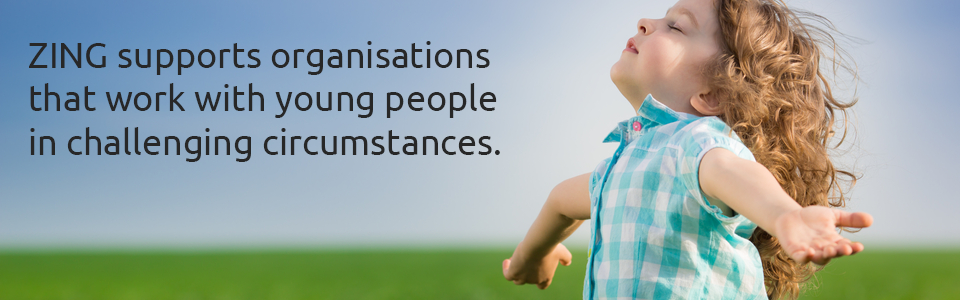
<style>
.page{position:relative;width:960px;height:300px}
.page>*{position:absolute;margin:0}
.t1{font:36px "Ubuntu";color:#272727}
</style>
<div class="page">
<p class="t1" style="left:29px;top:41px;width:471px;height:121px">ZING supports organisations that work with young people in challenging circumstances.</p>
</div>
